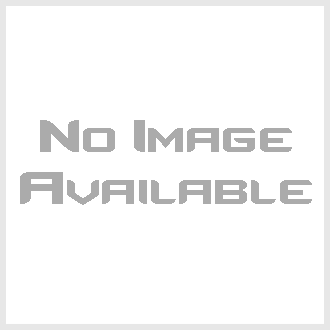
<style>
.page{position:relative;width:330px;height:330px;background:#ffffff}
.page>*{position:absolute;margin:0}
.t1{font:64px "CounterStrikeRegular";color:#ababab}
</style>
<div class="page">
<p class="t1" style="left:40px;top:120px;width:252px;height:32px">No Image</p>
<p class="t1" style="left:20px;top:172px;width:292px;height:33px">Available</p>
</div>
